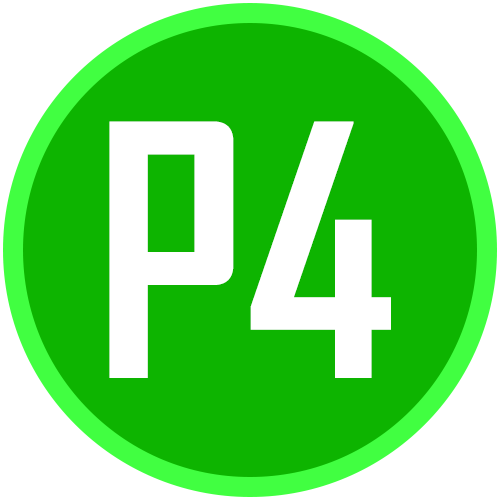
<style>
.page{position:relative;width:500px;height:500px;background:#0db400}
.page>*{position:absolute;margin:0}
.t1{font:335.4px "AgencyFB-Bold";color:#ffffff}
</style>
<div class="page">
<p class="t1" style="left:109px;top:121px;width:282px;height:257px">P4</p>
</div>
